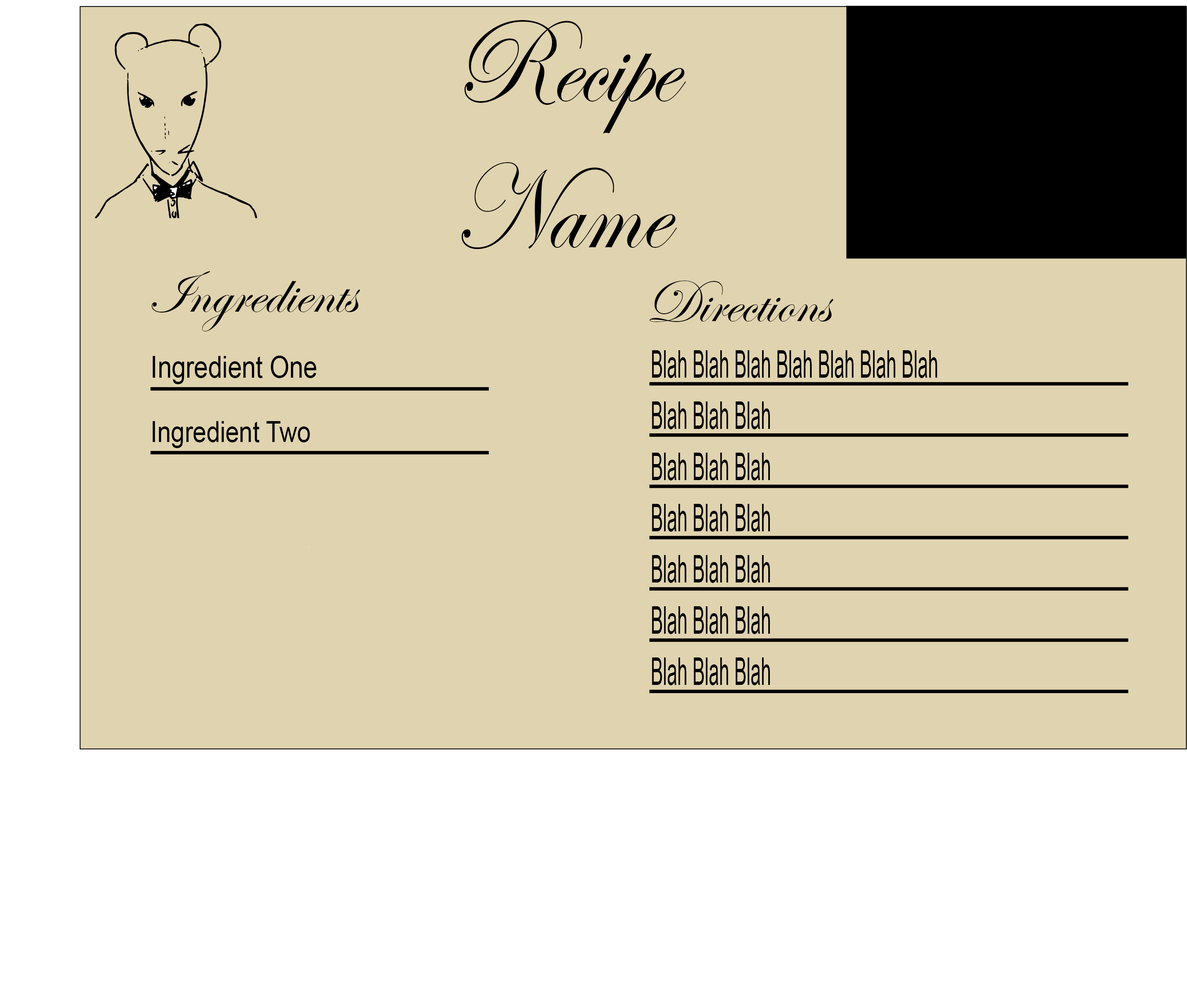
<style>
.page{position:relative;width:1187px;height:1004px;background:#e0d3af}
.page>*{position:absolute;margin:0}
.t1{font:122.1px "EdwardianScriptITC";color:#000000;scale:0.88 1}
.t2{font:61.5px "EdwardianScriptITC";color:#000000}
.t3{font:38.4px/51.2px "ArialNarrow";color:#000000;scale:0.58 1}
.t4{font:29.9px "ArialMT";color:#000000;scale:0.84 1}
.t5{font:29px "ArialMT";color:#000000;scale:0.84 1}
</style>
<div class="page">
<p class="t1" style="left:461px;top:20px;width:225px;height:229px">Recipe<br>Name</p>
<p class="t2" style="left:152px;top:271px;width:208px;height:61px">Ingredients</p>
<p class="t2" style="left:650px;top:281px;width:184px;height:41px">Directions</p>
<p class="t3" style="left:652px;top:350px;width:285px;height:336px">Blah Blah Blah Blah Blah Blah Blah<br>Blah Blah Blah<br>Blah Blah Blah<br>Blah Blah Blah<br>Blah Blah Blah <br>Blah Blah Blah<br>Blah Blah Blah</p>
<p class="t4" style="left:152px;top:356px;width:164px;height:28px">Ingredient One</p>
<p class="t5" style="left:152px;top:421px;width:158px;height:27px">Ingredient Two</p>
</div>
